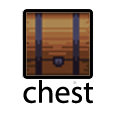
<style>
.page{position:relative;width:116px;height:116px;background:#ffffff}
.page>*{position:absolute;margin:0}
.t1{font:32px "MyriadPro-Regular";color:#000000}
</style>
<div class="page">
<p class="t1" style="left:23px;top:80px;width:70px;height:24px">chest</p>
</div>
